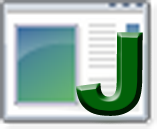
<style>
.page{position:relative;width:157px;height:129px}
.page>*{position:absolute;margin:0}
.t1{font:114.6px "Arial-Black"}
</style>
<div class="page">
<p class="t1" style="left:76px;top:32px;width:67px;height:84px">J</p>
</div>
